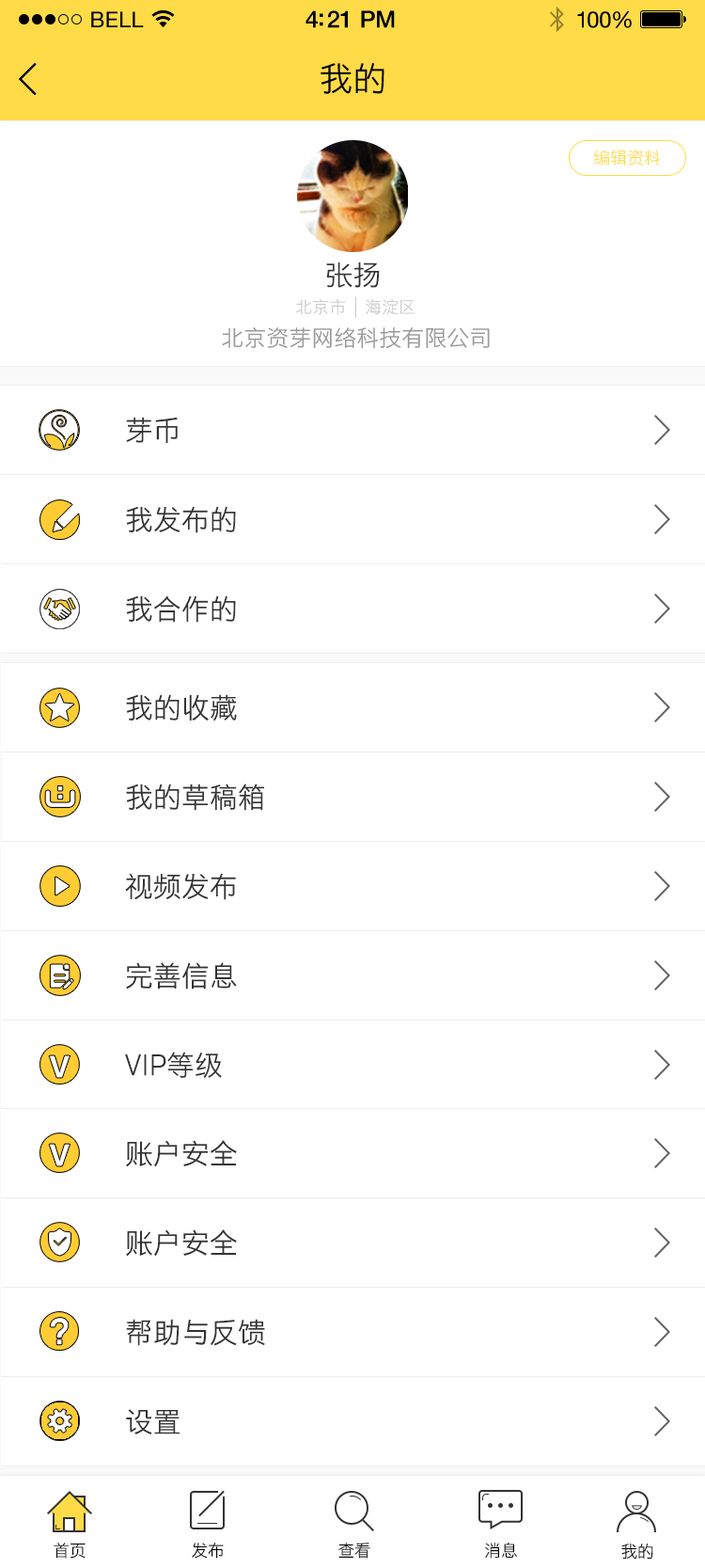
<style>
.page{position:relative;width:705px;height:1568px;background:#ffffff}
.page>*{position:absolute;margin:0}
.t1{font:21.6px "HelveticaNeue";letter-spacing:0.02em;color:#000000}
.t2{font:23.5px "HelveticaNeue-Medium";letter-spacing:-0.02em;color:#000000}
.t3{font:22.6px "HelveticaNeue";letter-spacing:-0.02em;color:#010101}
.t4{font:33.9px "STHeitiSC-Light";color:#000000}
.t5{font:16.9px "STHeitiSC-Light";color:#fedb47}
.t6{font:28.2px "STHeitiSC-Light";color:#333333}
.t7{font:16.9px "STHeitiSC-Light";color:#cccccc}
.t8{font:22.6px "STHeitiSC-Light";color:#999999}
.t9{font:16.9px "STHeitiSC-Light";letter-spacing:-0.02em;color:#000000}
</style>
<div class="page">
<p class="t1" style="left:91px;top:11px;width:53px;height:16px">BELL</p>
<p class="t1" style="left:91px;top:11px;width:53px;height:16px">BELL</p>
<p class="t2" style="left:306px;top:10px;width:89px;height:18px">4:21 PM</p>
<p class="t2" style="left:306px;top:10px;width:89px;height:18px">4:21 PM</p>
<p class="t3" style="left:578px;top:11px;width:54px;height:17px">100%</p>
<p class="t3" style="left:578px;top:11px;width:54px;height:17px">100%</p>
<p class="t4" style="left:321px;top:63px;width:64px;height:31px">我的</p>
<p class="t5" style="left:594px;top:150px;width:67px;height:16px">编辑资料</p>
<p class="t6" style="left:326px;top:262px;width:54px;height:26px">张扬</p>
<p class="t7" style="left:296px;top:297px;width:119px;height:21px">北京市  |  海淀区</p>
<p class="t8" style="left:222px;top:327px;width:268px;height:22px">北京资芽网络科技有限公司</p>
<p class="t6" style="left:126px;top:417px;width:52px;height:26px">芽币</p>
<p class="t6" style="left:126px;top:506px;width:110px;height:27px">我发布的</p>
<p class="t6" style="left:126px;top:595px;width:110px;height:28px">我合作的</p>
<p class="t6" style="left:126px;top:694px;width:111px;height:27px">我的收藏</p>
<p class="t6" style="left:126px;top:784px;width:138px;height:27px">我的草稿箱</p>
<p class="t6" style="left:125px;top:873px;width:111px;height:27px">视频发布</p>
<p class="t6" style="left:126px;top:962px;width:111px;height:28px">完善信息</p>
<p class="t6" style="left:125px;top:1052px;width:97px;height:26px">VIP等级</p>
<p class="t6" style="left:126px;top:1140px;width:111px;height:27px">账户安全</p>
<p class="t6" style="left:126px;top:1229px;width:111px;height:28px">账户安全</p>
<p class="t6" style="left:126px;top:1319px;width:139px;height:27px">帮助与反馈</p>
<p class="t6" style="left:126px;top:1409px;width:54px;height:25px">设置</p>
<p class="t9" style="left:485px;top:1542px;width:32px;height:17px">消息</p>
<p class="t9" style="left:54px;top:1543px;width:32px;height:16px">首页</p>
<p class="t9" style="left:192px;top:1543px;width:32px;height:16px">发布</p>
<p class="t9" style="left:339px;top:1543px;width:32px;height:16px">查看</p>
<p class="t9" style="left:622px;top:1544px;width:32px;height:16px">我的</p>
</div>
